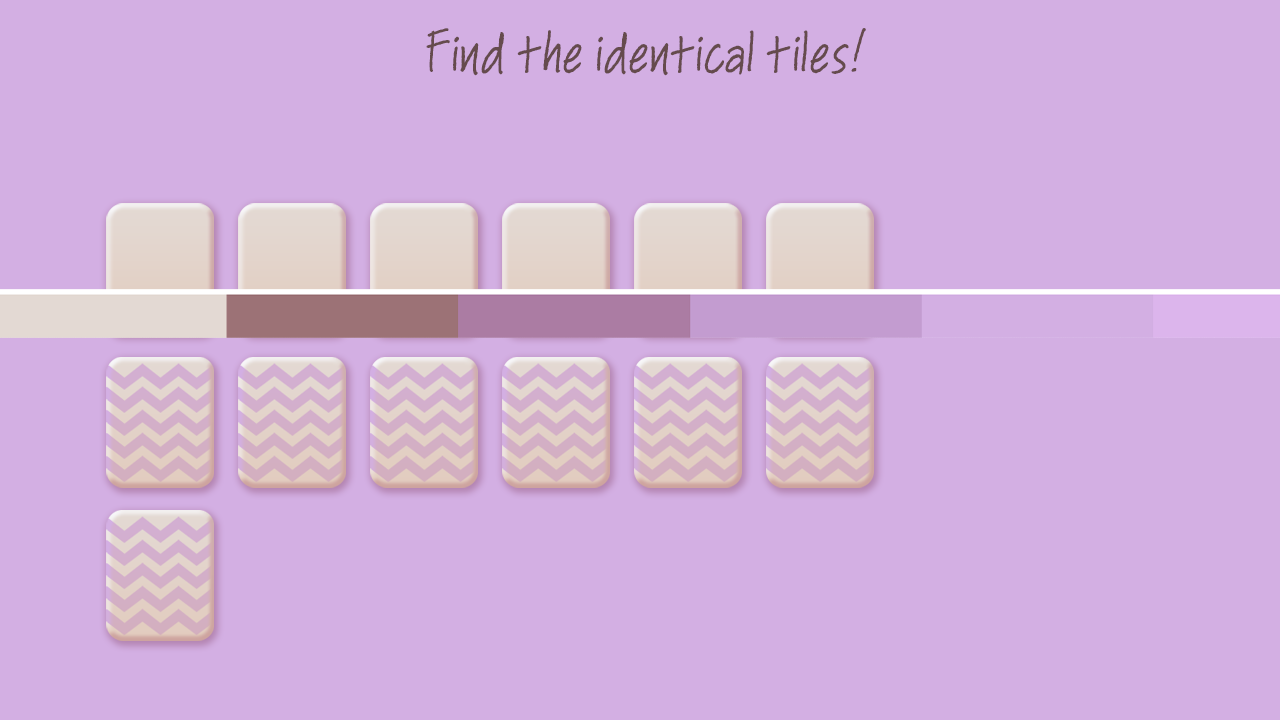
<style>
.page{position:relative;width:1280px;height:720px;background:#d3afe3}
.page>*{position:absolute;margin:0}
.t1{font:60px "WishfulThinkerBB-Regular";color:#654b4d}
</style>
<div class="page">
<p class="t1" style="left:426px;top:28px;width:440px;height:48px">Find the identical tiles!</p>
</div>
